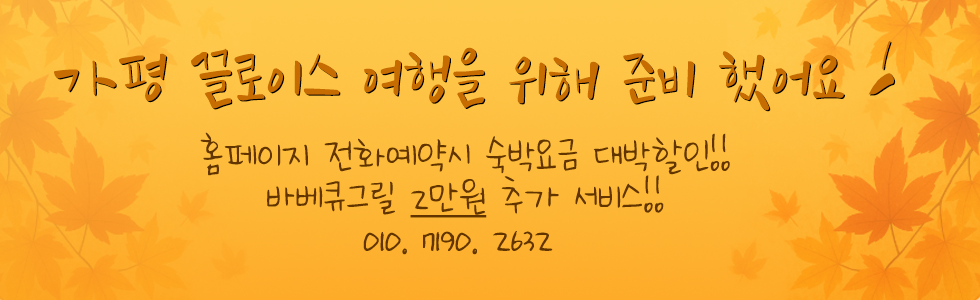
<style>
.page{position:relative;width:980px;height:300px}
.page>*{position:absolute;margin:0}
.t1{font:71.4px "NanumDaeHanMinGugYeorSaCe";color:#c66c00}
.t2{font:71.4px "NanumDaeHanMinGugYeorSaCe"}
.t3{font:48px/41.7px "NanumMasIssNeunCe";color:#623500}
.t4{font:48px/41.7px "NanumMasIssNeunCe";color:#623500;text-decoration:underline}
</style>
<div class="page">
<p class="t1" style="left:54px;top:41px;width:840px;height:70px">가평 끌로이스 여행을 위해 준비 했어요 !</p>
<p class="t2" style="left:55px;top:42px;width:841px;height:70px">가평 끌로이스 여행을 위해 준비 했어요 !</p>
<p class="t3" style="left:200px;top:132px;width:530px;height:123px;text-align:center">홈페이지 전화예약시 숙박요금 대박할인!!<br>바베큐그릴 <span class="t4">2만원</span> 추가 서비스!!<br>010. 7190. 2632</p>
</div>
